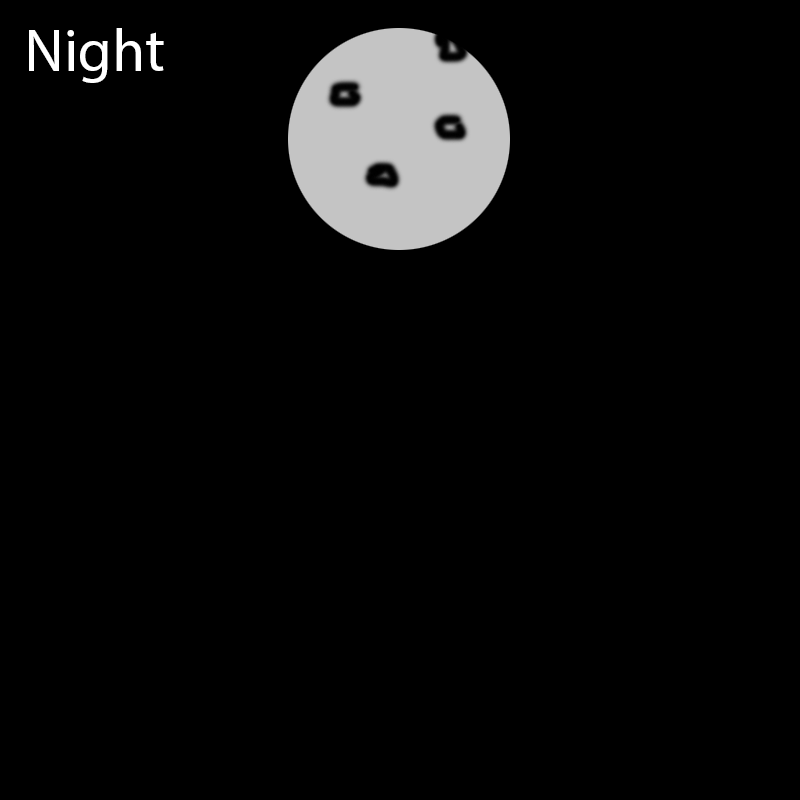
<style>
.page{position:relative;width:800px;height:800px;background:#000000}
.page>*{position:absolute;margin:0}
.t1{font:60px "MyriadPro-Regular";color:#ffffff}
</style>
<div class="page">
<p class="t1" style="left:29px;top:28px;width:135px;height:55px">Night</p>
</div>
